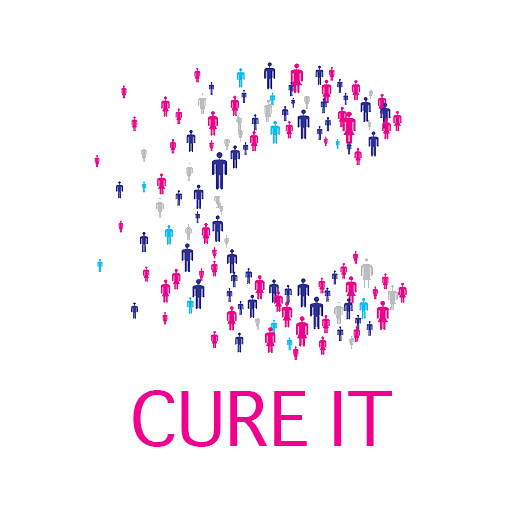
<style>
.page{position:relative;width:512px;height:512px;background:#ffffff}
.page>*{position:absolute;margin:0}
.t1{font:72px "Geneva";color:#ef008f}
</style>
<div class="page">
<p class="t1" style="left:133px;top:390px;width:174px;height:57px">CURE</p>
<p class="t1" style="left:334px;top:391px;width:58px;height:55px">IT</p>
</div>
